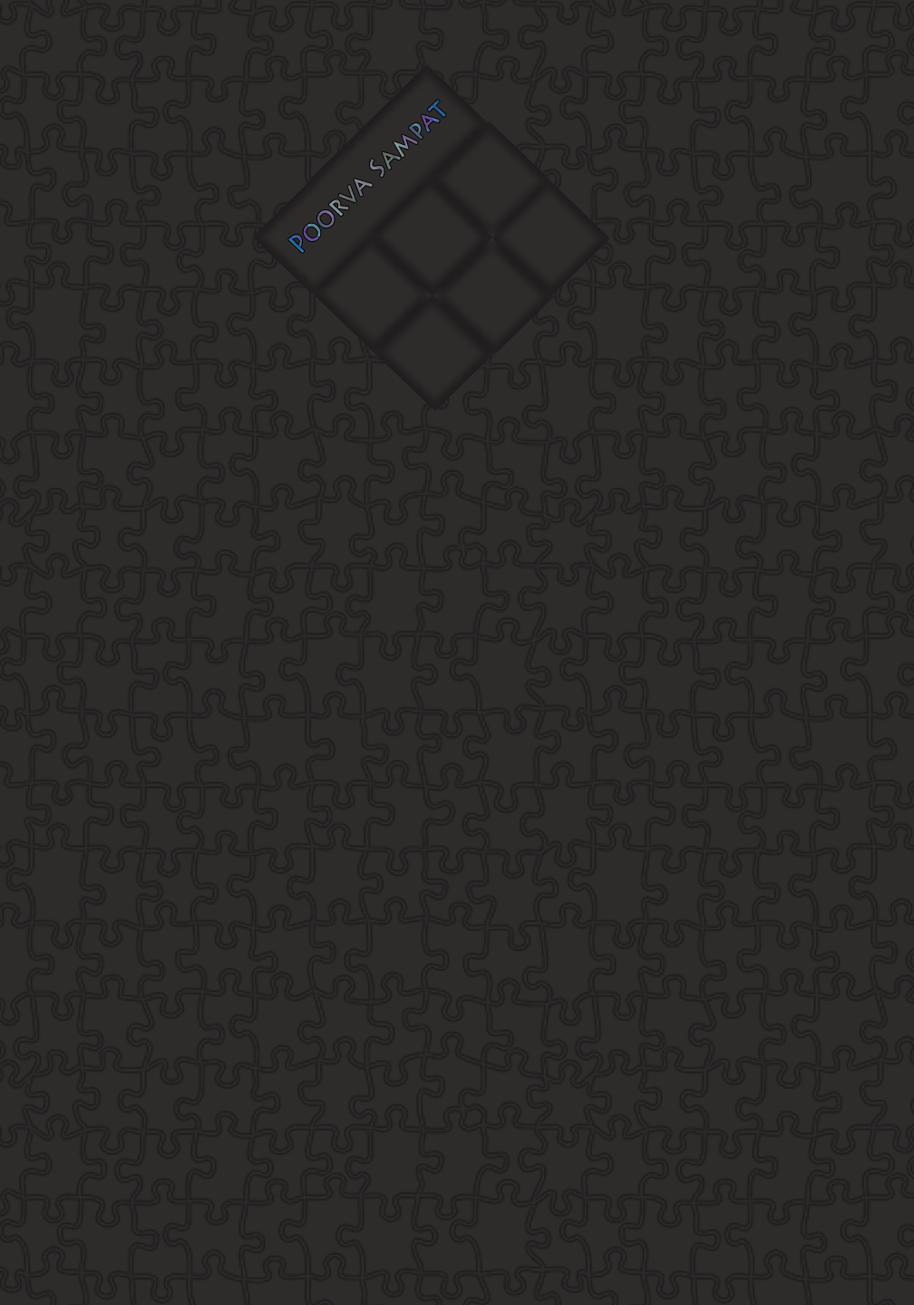
<style>
.page{position:relative;width:914px;height:1305px;background:#2e2b2b}
.page>*{position:absolute;margin:0}
.t1{font:27.1px "LithosPro-Regular";font-weight:bold;scale:0.89 1}
</style>
<div class="page">
<p class="t1" style="left:288px;top:100px;width:158px;height:153px;rotate:-44deg">Poorva Sampat</p>
</div>
